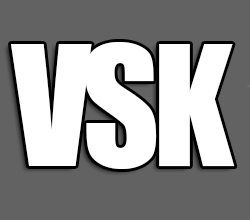
<style>
.page{position:relative;width:250px;height:220px;background:#626262}
.page>*{position:absolute;margin:0}
.t1{font:154.1px "Impact";letter-spacing:-0.05em;color:#ffffff}
</style>
<div class="page">
<p class="t1" style="left:11px;top:42px;width:224px;height:127px">VSK</p>
</div>
